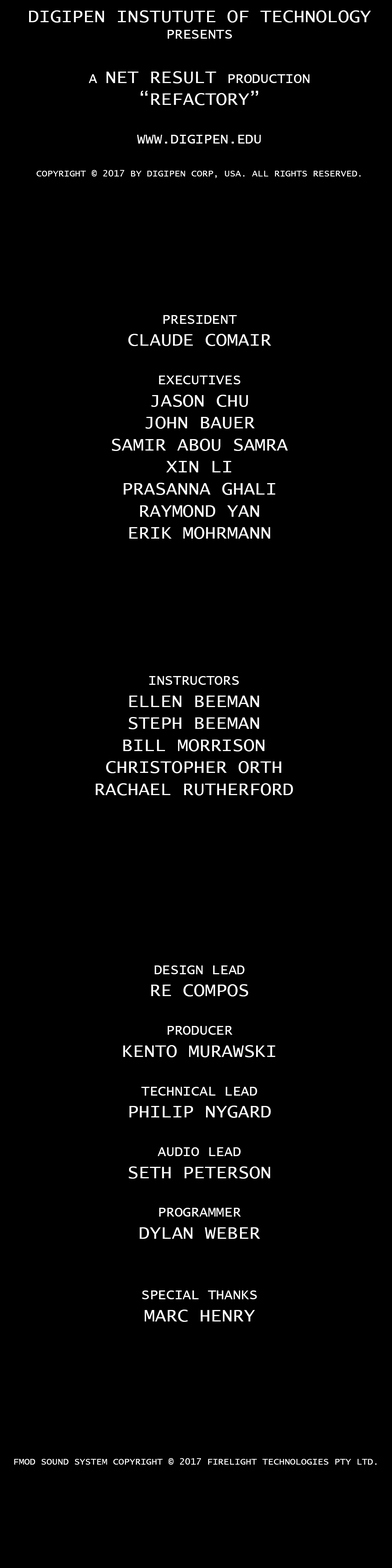
<style>
.page{position:relative;width:392px;height:1568px;background:#000000}
.page>*{position:absolute;margin:0}
.t1{font:9.2px "LucidaConsole";color:#ffffff}
.t2{font:18.4px "LucidaConsole";color:#ffffff}
.t3{font:13.8px "LucidaConsole";color:#ffffff}
</style>
<div class="page">
<p class="t1" style="left:29px;top:10px;width:342px;height:168px;text-align:center"><span class="t2">DIGIPEN INSTUTUTE OF TECHNOLOGY<br></span><span class="t3">PRESENTS<br><br>A </span><span class="t2">NET RESULT </span><span class="t3">PRODUCTION<br></span><span class="t2">“REFACTORY”<br><br></span><span class="t3">WWW.DIGIPEN.EDU<br><br></span>COPYRIGHT © 2017 BY DIGIPEN CORP, USA. ALL RIGHTS RESERVED.</p>
<p class="t2" style="left:112px;top:315px;width:176px;height:224px;text-align:center"><span class="t3">PRESIDENT<br></span>CLAUDE COMAIR<br><br><span class="t3">EXECUTIVES<br></span>JASON CHU<br>JOHN BAUER<br>SAMIR ABOU SAMRA<br>XIN LI<br>PRASANNA GHALI<br>RAYMOND YAN<br>ERIK MOHRMANN</p>
<p class="t2" style="left:96px;top:676px;width:197px;height:119px;text-align:center"><span class="t3">INSTRUCTORS<br></span>ELLEN BEEMAN<br>STEPH BEEMAN<br>BILL MORRISON<br>CHRISTOPHER ORTH<br>RACHAEL RUTHERFORD</p>
<p class="t2" style="left:123px;top:965px;width:152px;height:357px;text-align:center"><span class="t3">DESIGN LEAD<br></span>RE COMPOS<br><br><span class="t3">PRODUCER<br></span>KENTO MURAWSKI<br><br><span class="t3">TECHNICAL LEAD<br></span>PHILIP NYGARD<br><br><span class="t3">AUDIO LEAD<br></span>SETH PETERSON<br><br><span class="t3">PROGRAMMER<br></span>DYLAN WEBER<br><br><br><span class="t3">SPECIAL THANKS<br></span>MARC HENRY</p>
<p class="t1" style="left:14px;top:1458px;width:363px;height:7px">FMOD SOUND SYSTEM COPYRIGHT © 2017 FIRELIGHT TECHNOLOGIES PTY LTD.</p>
</div>
